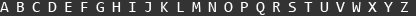
<style>
.page{position:relative;width:416px;height:16px;background:#333333}
.page>*{position:absolute;margin:0}
.t1{font:16px "Consolas";letter-spacing:0.45em;color:#ffffff;text-transform:uppercase}
</style>
<div class="page">
<p class="t1" style="left:0px;top:2px;width:9px;height:10px">a</p>
<p class="t1" style="left:17px;top:2px;width:7px;height:10px">B</p>
<p class="t1" style="left:32px;top:2px;width:8px;height:10px">C</p>
<p class="t1" style="left:48px;top:2px;width:9px;height:10px">D</p>
<p class="t1" style="left:65px;top:2px;width:7px;height:10px">E</p>
<p class="t1" style="left:81px;top:2px;width:7px;height:10px">F</p>
<p class="t1" style="left:96px;top:2px;width:8px;height:10px">G</p>
<p class="t1" style="left:112px;top:2px;width:9px;height:10px">H</p>
<p class="t1" style="left:129px;top:2px;width:7px;height:10px">I</p>
<p class="t1" style="left:145px;top:2px;width:6px;height:10px">J</p>
<p class="t1" style="left:161px;top:2px;width:7px;height:10px">K</p>
<p class="t1" style="left:177px;top:2px;width:7px;height:10px">L</p>
<p class="t1" style="left:192px;top:2px;width:9px;height:10px">M</p>
<p class="t1" style="left:208px;top:2px;width:8px;height:10px">N</p>
<p class="t1" style="left:224px;top:2px;width:9px;height:10px">O</p>
<p class="t1" style="left:241px;top:2px;width:7px;height:10px">P</p>
<p class="t1" style="left:256px;top:2px;width:9px;height:13px">Q</p>
<p class="t1" style="left:273px;top:2px;width:8px;height:10px">R</p>
<p class="t1" style="left:288px;top:2px;width:8px;height:10px">S</p>
<p class="t1" style="left:304px;top:2px;width:9px;height:10px">T</p>
<p class="t1" style="left:320px;top:2px;width:9px;height:10px">U</p>
<p class="t1" style="left:336px;top:2px;width:9px;height:10px">V</p>
<p class="t1" style="left:352px;top:2px;width:9px;height:10px">W</p>
<p class="t1" style="left:368px;top:2px;width:9px;height:10px">X</p>
<p class="t1" style="left:384px;top:2px;width:9px;height:10px">Y</p>
<p class="t1" style="left:400px;top:2px;width:8px;height:10px">Z</p>
</div>
